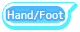
<style>
.page{position:relative;width:80px;height:32px;background:#ffffff}
.page>*{position:absolute;margin:0}
.t1{font:11px "JK-Gothic-M";color:#ffffff}
</style>
<div class="page">
<p class="t1" style="left:7px;top:10px;width:57px;height:10px">Hand/Foot</p>
</div>
